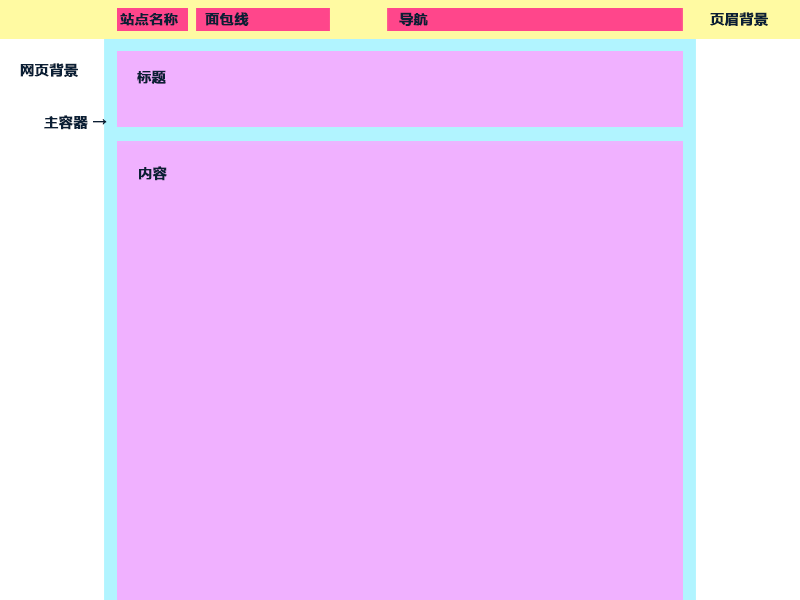
<style>
.page{position:relative;width:800px;height:600px;background:#f0b1ff}
.page>*{position:absolute;margin:0}
.t1{font:14px "MicrosoftYaHei-Bold";letter-spacing:0.015em;color:#0b1f35;font-weight:bold}
</style>
<div class="page">
<p class="t1" style="left:120px;top:13px;width:58px;height:13px">站点名称</p>
<p class="t1" style="left:205px;top:12px;width:44px;height:14px">面包线</p>
<p class="t1" style="left:399px;top:12px;width:29px;height:14px">导航</p>
<p class="t1" style="left:710px;top:12px;width:58px;height:14px">页眉背景</p>
<p class="t1" style="left:20px;top:63px;width:58px;height:14px">网页背景</p>
<p class="t1" style="left:137px;top:70px;width:29px;height:14px">标题</p>
<p class="t1" style="left:44px;top:115px;width:63px;height:15px">主容器 →</p>
<p class="t1" style="left:139px;top:166px;width:28px;height:15px">内容</p>
</div>
